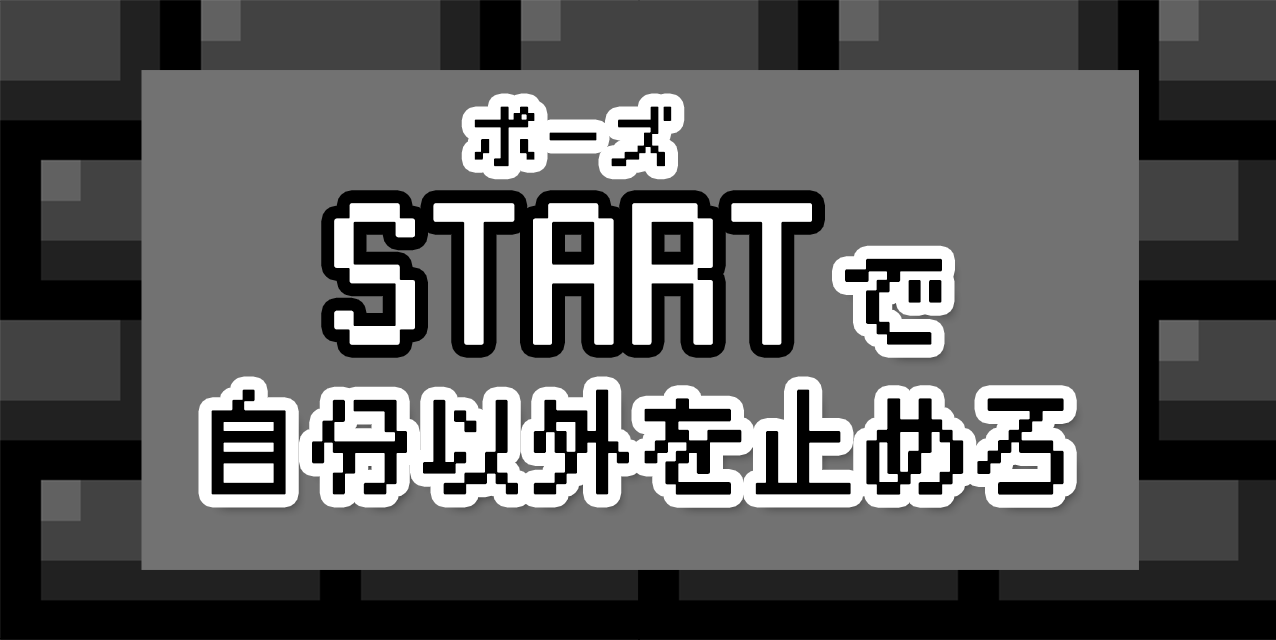
<style>
.page{position:relative;width:1276px;height:640px;background:#727272}
.page>*{position:absolute;margin:0}
.t1{font:66.7px "BestTen-CRT";color:#000000;font-weight:bold}
.t2{font:158.3px "BestTen-CRT";color:#ffffff;font-weight:bold}
.t3{font:108px "BestTen-CRT";color:#000000;font-weight:bold}
</style>
<div class="page">
<p class="t1" style="left:474px;top:106px;width:198px;height:61px">ポーズ</p>
<p class="t2" style="left:334px;top:203px;width:478px;height:142px">START</p>
<p class="t3" style="left:845px;top:258px;width:97px;height:87px">で</p>
<p class="t3" style="left:211px;top:389px;width:853px;height:106px">自分以外を止めろ</p>
</div>
